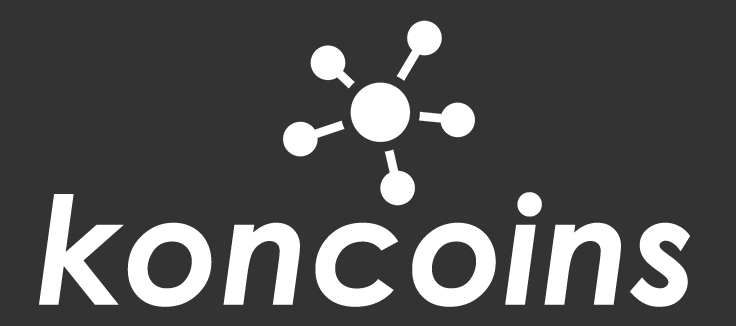
<style>
.page{position:relative;width:736px;height:326px;background:#333333}
.page>*{position:absolute;margin:0}
.t1{font:150px "CenturyGothic-BoldItalic";letter-spacing:0.005em;color:#ffffff}
</style>
<div class="page">
<p class="t1" style="left:39px;top:192px;width:651px;height:115px">koncoins</p>
</div>
